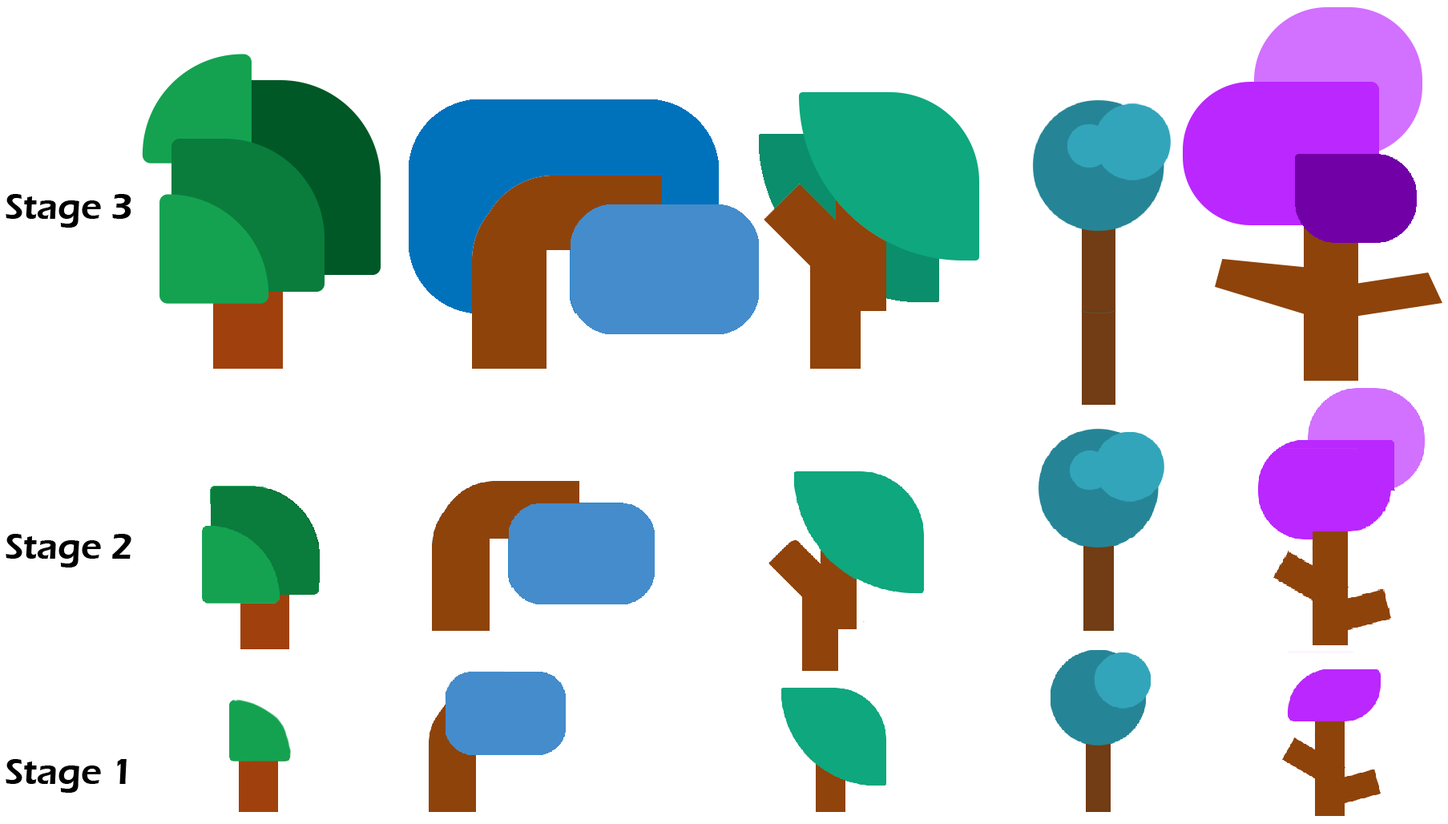
<style>
.page{position:relative;width:1448px;height:824px;background:#ffffff}
.page>*{position:absolute;margin:0}
.t1{font:36.7px "ErasITC-Demi";color:#000000}
</style>
<div class="page">
<p class="t1" style="left:6px;top:194px;width:125px;height:34px">Stage 3</p>
<p class="t1" style="left:6px;top:534px;width:125px;height:33px">Stage 2</p>
<p class="t1" style="left:6px;top:759px;width:121px;height:33px">Stage 1</p>
</div>
